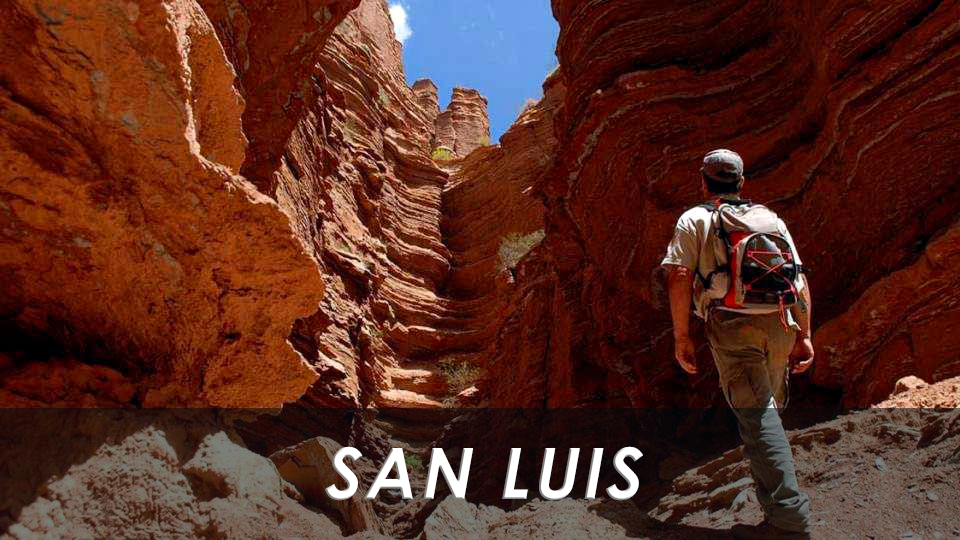
<style>
.page{position:relative;width:960px;height:540px}
.page>*{position:absolute;margin:0}
.t1{font:70.4px "CenturyGothic-Bold";letter-spacing:0.05em;color:#ffffff;font-style:italic}
</style>
<div class="page">
<p class="t1" style="left:325px;top:446px;width:318px;height:55px">SAN LUIS</p>
</div>
